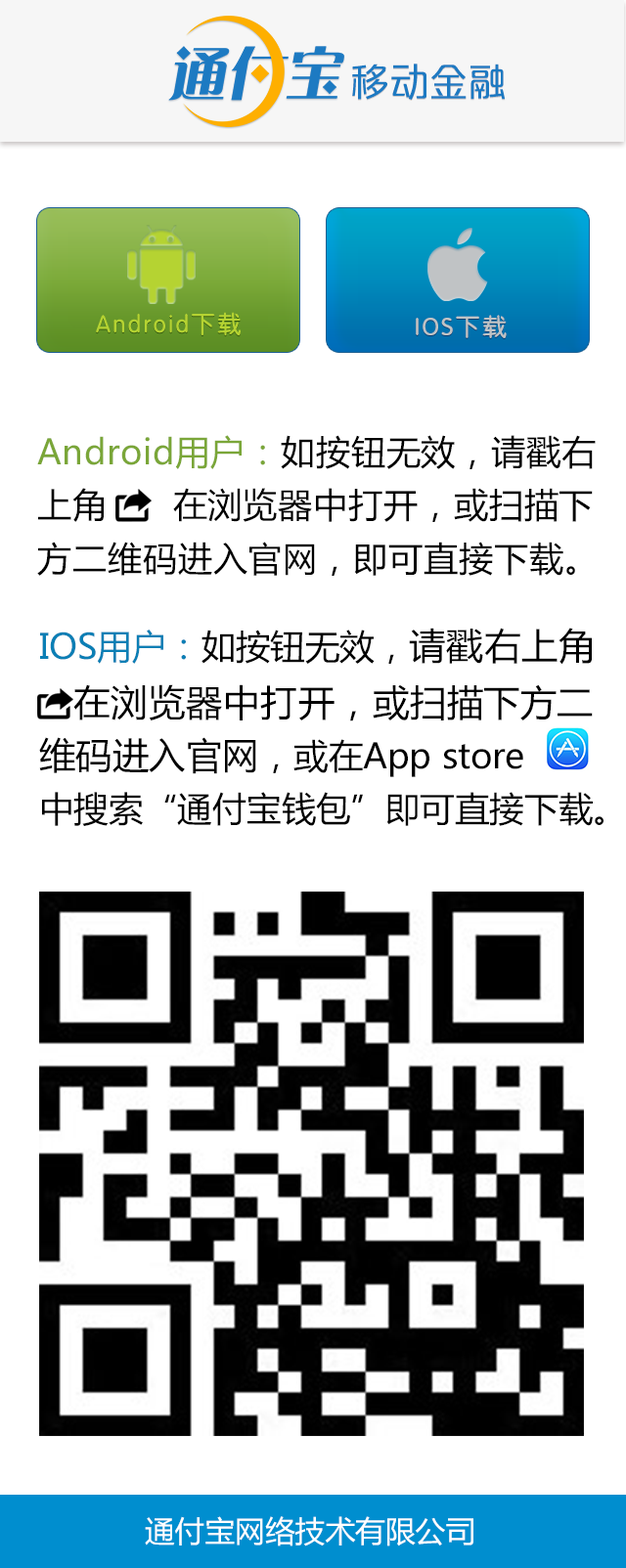
<style>
.page{position:relative;width:626px;height:1568px;background:#ffffff}
.page>*{position:absolute;margin:0}
.t1{font:39.8px "FZPSHJW--GB1-0";color:#1d7ac2}
.t2{font:24.2px "JZunYuan";letter-spacing:0.1em;color:#b5d332}
.t3{font:24.2px "JZunYuan";letter-spacing:0.1em;color:#c0c3c5}
.t4{font:34.5px/53px "MicrosoftYaHei";letter-spacing:0.02em;color:#000000}
.t5{font:34.5px/53px "MicrosoftYaHei";letter-spacing:0.02em;color:#7aa638}
.t6{font:34.6px/53px "MicrosoftYaHei";color:#000000}
.t7{font:34.6px/53px "MicrosoftYaHei";color:#0b7fb5}
.t8{font:36.7px/56.3px "MicrosoftYaHei";letter-spacing:0.02em;color:#000000}
.t9{font:36.7px/53px "MicrosoftYaHei";color:#000000}
.t10{font:29.9px "MicrosoftYaHei";color:#ffffff}
</style>
<div class="page">
<p class="t1" style="left:352px;top:64px;width:153px;height:36px">移动金融</p>
<p class="t2" style="left:96px;top:312px;width:144px;height:24px">Android下载</p>
<p class="t3" style="left:415px;top:315px;width:91px;height:23px">IOS下载</p>
<p class="t4" style="left:37px;top:435px;width:558px;height:141px"><span class="t5">Android用户：</span>如按钮无效，请戳右<br>上角      在浏览器中打开，或扫描下<br>方二维码进入官网，即可直接下载。</p>
<p class="t6" style="left:39px;top:628px;width:564px;height:198px"><span class="t7">IOS用户：</span>如按钮无效，<span class="t8">请戳右上角<br>   在浏览器中打开，或</span><span class="t9">扫描下方二<br>维码进入官网</span>，或在App store  <br>中搜索“通付宝钱包”即可直接下载。</p>
<p class="t10" style="left:145px;top:1516px;width:328px;height:30px">通付宝网络技术有限公司</p>
</div>
